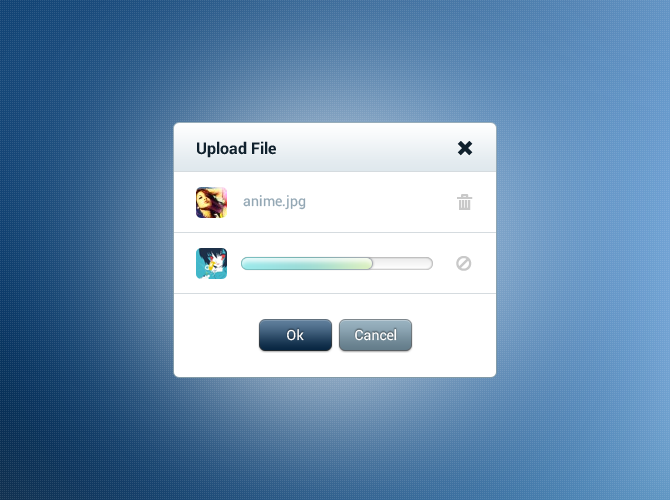
<style>
.page{position:relative;width:670px;height:500px}
.page>*{position:absolute;margin:0}
.t1{font:16px "Roboto-Bold";color:#10212d}
.t2{font:14px "Roboto-Regular";color:#93a7b4}
.t3{font:14px "Roboto-Regular";color:#ffffff}
</style>
<div class="page">
<p class="t1" style="left:197px;top:141px;width:79px;height:17px">Upload File</p>
<p class="t2" style="left:243px;top:195px;width:63px;height:15px">anime.jpg</p>
<p class="t3" style="left:287px;top:329px;width:17px;height:12px">Ok</p>
<p class="t3" style="left:355px;top:329px;width:42px;height:12px">Cancel</p>
</div>
